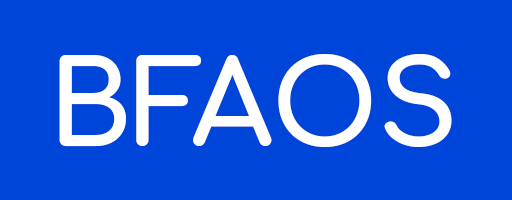
<style>
.page{position:relative;width:512px;height:200px;background:#0045da}
.page>*{position:absolute;margin:0}
.t1{font:116.7px "Comfortaa-Bold";color:#ffffff}
</style>
<div class="page">
<p class="t1" style="left:59px;top:54px;width:393px;height:93px">BFAOS</p>
</div>
